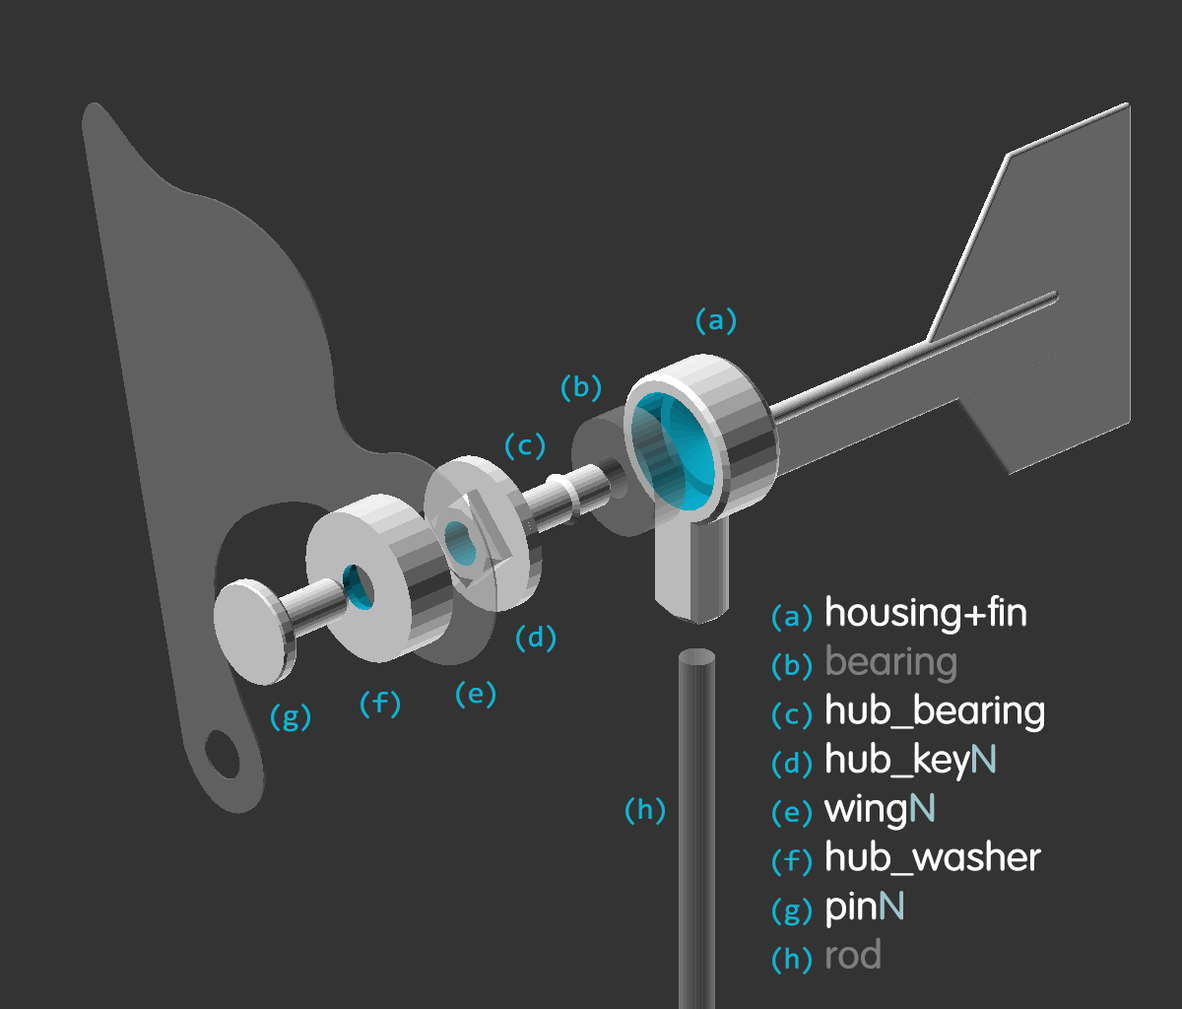
<style>
.page{position:relative;width:1182px;height:1009px;background:#333333}
.page>*{position:absolute;margin:0}
.t1{font:29.6px "Consolas";letter-spacing:-0.05em;color:#0cb5d4;scale:1.05 1}
.t2{font:39.4px "Arial-Rounded";color:#ffffff;scale:1.05 1}
.t3{font:39.4px "Arial-Rounded";color:#7e7e7e;scale:1.05 1}
.t4{font:39.4px "Arial-Rounded";color:#9ec5cc;scale:1.05 1}
</style>
<div class="page">
<p class="t1" style="left:696px;top:307px;width:40px;height:29px">(a)</p>
<p class="t1" style="left:562px;top:374px;width:39px;height:29px">(b)</p>
<p class="t1" style="left:505px;top:432px;width:40px;height:29px">(c)</p>
<p class="t2" style="left:772px;top:595px;width:272px;height:379px"><span class="t1">(a)</span> housing+fin<br><span class="t1">(b) </span><span class="t3">bearing<br></span><span class="t1">(c)</span> hub_bearing<br><span class="t1">(d)</span> hub_key<span class="t4">N<br></span><span class="t1">(e)</span> wing<span class="t4">N<br></span><span class="t1">(f)</span> hub_washer<br><span class="t1">(g)</span> pin<span class="t4">N<br></span><span class="t1">(h) </span><span class="t3">rod</span></p>
<p class="t1" style="left:516px;top:625px;width:40px;height:28px">(d)</p>
<p class="t1" style="left:456px;top:681px;width:40px;height:28px">(e)</p>
<p class="t1" style="left:361px;top:691px;width:39px;height:28px">(f)</p>
<p class="t1" style="left:271px;top:703px;width:39px;height:29px">(g)</p>
<p class="t1" style="left:626px;top:797px;width:39px;height:29px">(h)</p>
</div>
